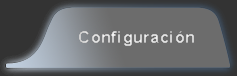
<style>
.page{position:relative;width:237px;height:76px;background:#6c6c6c}
.page>*{position:absolute;margin:0}
.t1{font:15.8px "Arial-BoldMT";letter-spacing:0.05em}
</style>
<div class="page">
<p class="t1" style="left:79px;top:31px;width:115px;height:15px">Configuración</p>
</div>
